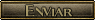
<style>
.page{position:relative;width:95px;height:20px}
.page>*{position:absolute;margin:0}
.t1{font:30px "Fleet-Street";color:#a59768}
</style>
<div class="page">
<p class="t1" style="left:25px;top:5px;width:48px;height:12px">Enviar</p>
</div>
